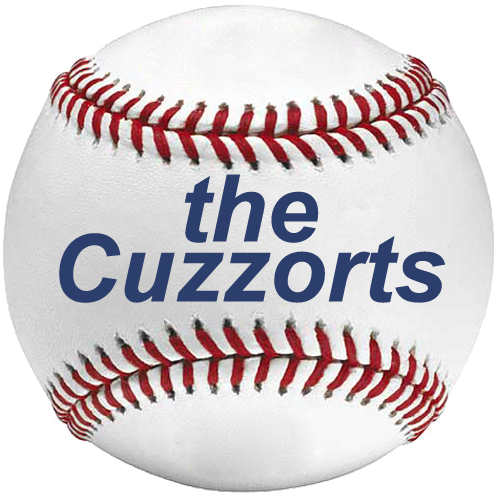
<style>
.page{position:relative;width:500px;height:500px;background:#ffffff}
.page>*{position:absolute;margin:0}
.t1{font:93.5px/59.9px "Arial-BoldItalicMT";color:#2c3e6c}
</style>
<div class="page">
<p class="t1" style="left:59px;top:174px;width:386px;height:129px;text-align:center">the<br>Cuzzorts</p>
</div>
